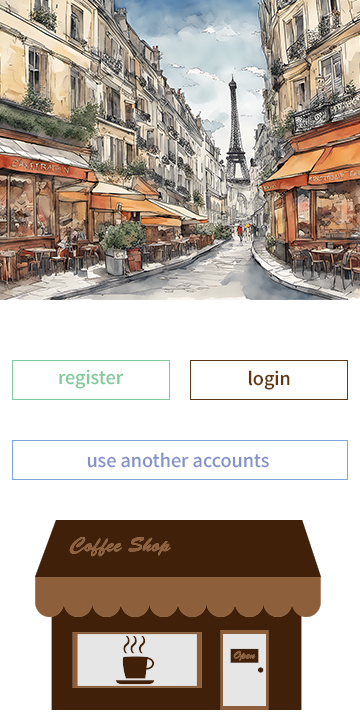
<style>
.page{position:relative;width:360px;height:720px;background:#ffffff}
.page>*{position:absolute;margin:0}
.t1{font:18px "NotoSansKR-Medium";color:#82ca9c}
.t2{font:18px "NotoSansKR-Medium";color:#603913}
.t3{font:18px "NotoSansKR-Medium";color:#8393ca}
</style>
<div class="page">
<p class="t1" style="left:59px;top:369px;width:65px;height:20px">register</p>
<p class="t2" style="left:248px;top:370px;width:42px;height:20px">login</p>
<p class="t3" style="left:87px;top:452px;width:182px;height:16px">use another accounts</p>
</div>
